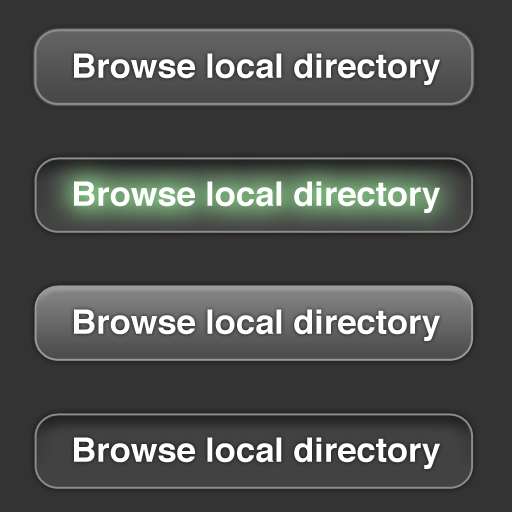
<style>
.page{position:relative;width:512px;height:512px;background:#333333}
.page>*{position:absolute;margin:0}
.t1{font:33.6px "Helvetica-Bold";color:#ffffff}
</style>
<div class="page">
<p class="t1" style="left:74px;top:53px;width:366px;height:32px">Browse local directory</p>
<p class="t1" style="left:74px;top:181px;width:366px;height:32px">Browse local directory</p>
<p class="t1" style="left:74px;top:309px;width:366px;height:32px">Browse local directory</p>
<p class="t1" style="left:74px;top:437px;width:366px;height:32px">Browse local directory</p>
</div>
